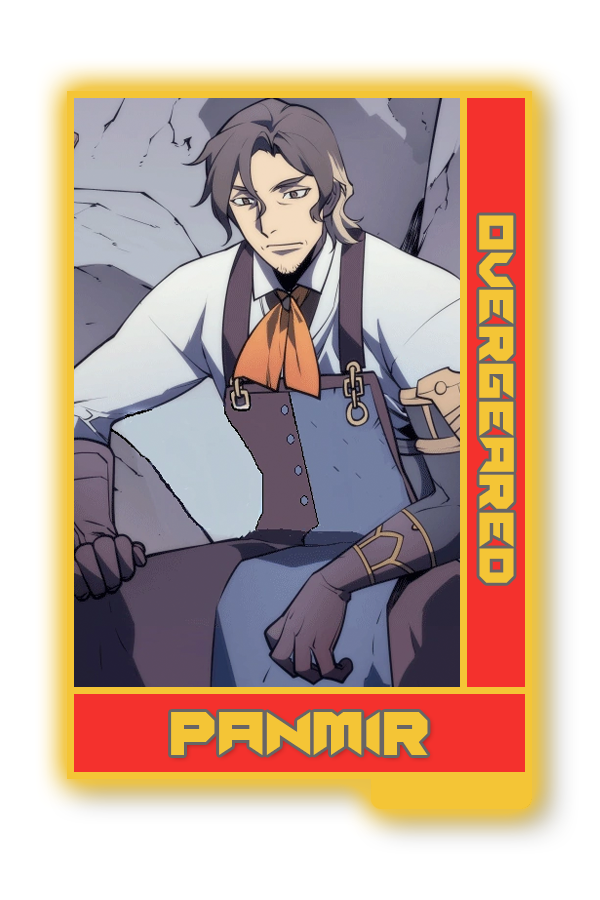
<style>
.page{position:relative;width:600px;height:900px;background:#ffffff}
.page>*{position:absolute;margin:0}
.t1{font:48.8px "Suggested-Regular";color:#f4c536}
.t2{font:62.5px "Suggested-Regular";color:#f4c536}
</style>
<div class="page">
<p class="t1" style="left:479px;top:215px;width:35px;height:368px;rotate:90deg">OVERGEARED</p>
<p class="t2" style="left:171px;top:712px;width:257px;height:43px">Panmir</p>
</div>
